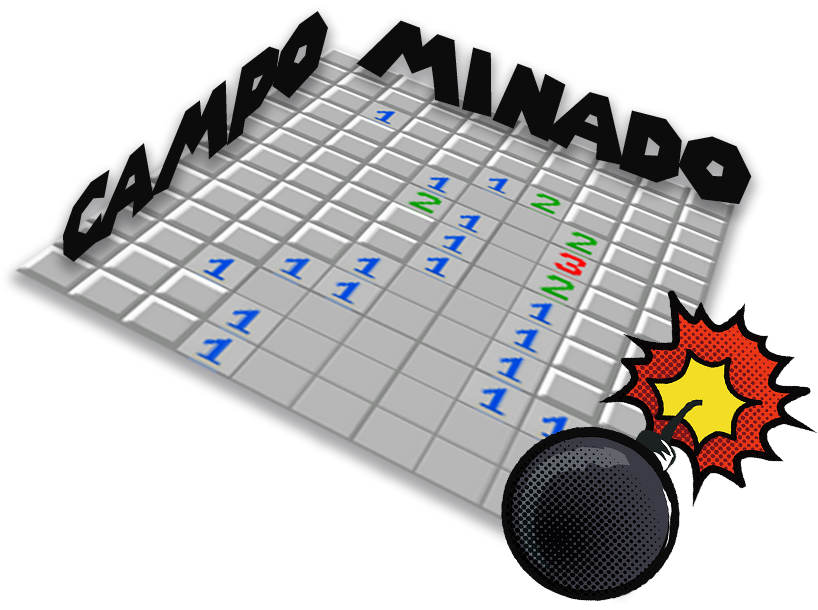
<style>
.page{position:relative;width:818px;height:610px;background:#ffffff}
.page>*{position:absolute;margin:0}
.t1{font:103.4px "SuperMarioGalaxy";color:#0d0c0c;scale:0.82 1}
.t2{font:85.4px "SuperMarioGalaxy";color:#0d0c0c;scale:1.13 1}
</style>
<div class="page">
<p class="t1" style="left:63px;top:11px;width:265px;height:251px;rotate:-37deg">Campo</p>
<p class="t2" style="left:356px;top:20px;width:396px;height:184px;rotate:21deg">minado</p>
</div>
